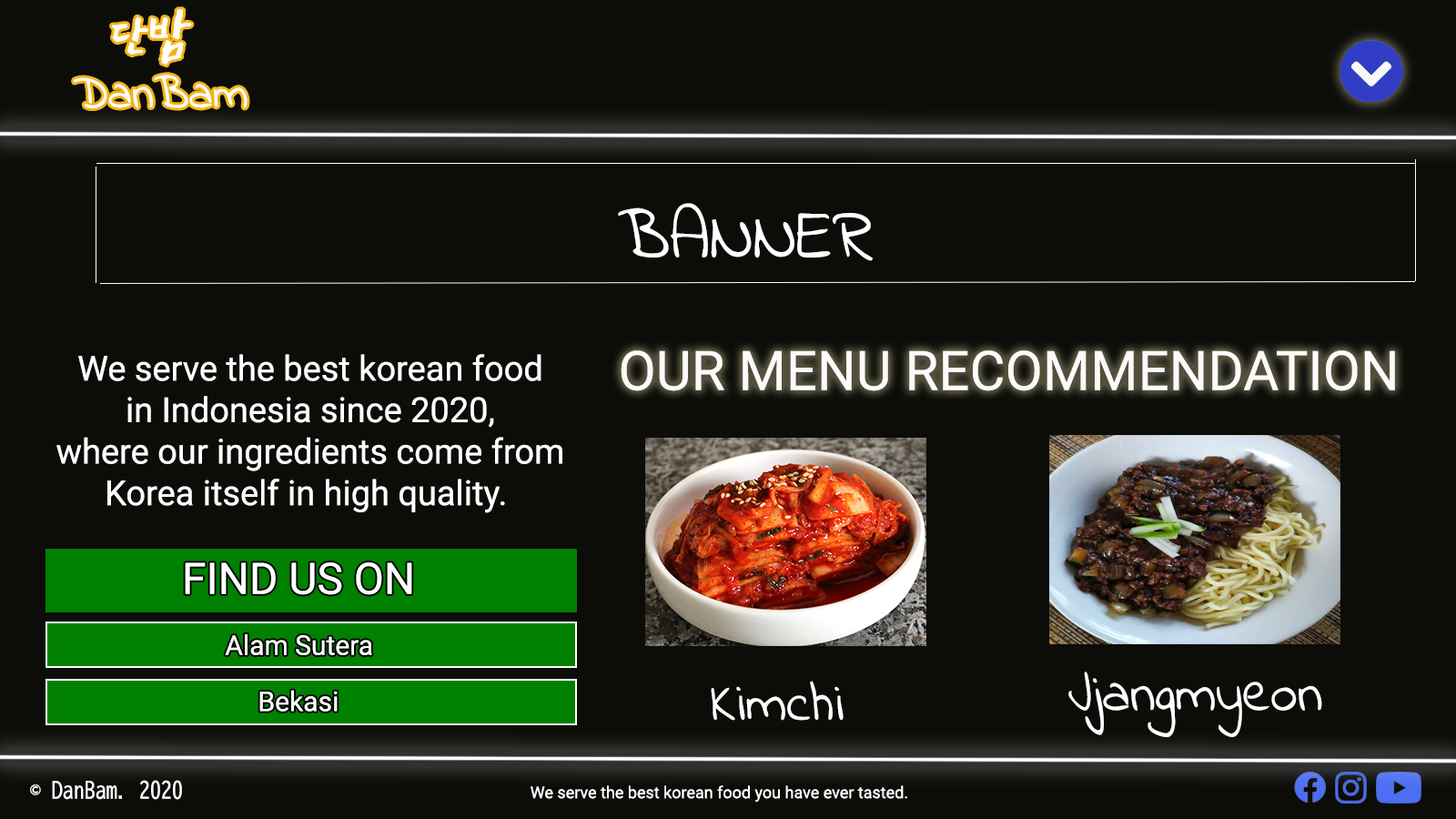
<style>
.page{position:relative;width:1456px;height:819px;background:#0c0c09}
.page>*{position:absolute;margin:0}
.t1{font:65.5px "EastSeaDokdo-Regular";color:#fffcf9}
.t2{font:47.3px "IndieFlower";color:#ffffff}
.t3{font:71px "IndieFlower";color:#ffffff}
.t4{font:34.6px "Roboto-Regular";color:#ffffff}
.t5{font:54.6px "Roboto-Regular";color:#fff9f9}
.t6{font:43.6px "Roboto-Regular";color:#ffffff}
.t7{font:27.3px "Roboto-Regular";color:#ffffff}
.t8{font:54.6px "IndieFlower";color:#ffffff}
.t9{font:21.8px "BIZ-UDGothic";color:#ffffff}
.t10{font:16.4px "Roboto-Regular";color:#ffffff}
</style>
<div class="page">
<p class="t1" style="left:112px;top:9px;width:80px;height:57px">단밤</p>
<p class="t2" style="left:74px;top:75px;width:174px;height:33px">DanBam</p>
<p class="t3" style="left:618px;top:203px;width:255px;height:58px">BANNER</p>
<p class="t4" style="left:56px;top:354px;width:506px;height:159px;text-align:center">We serve the best korean food<br>in Indonesia since 2020,<br>where our ingredients come from<br>Korea itself in high quality.</p>
<p class="t5" style="left:621px;top:350px;width:774px;height:41px">OUR MENU RECOMMENDATION</p>
<p class="t6" style="left:185px;top:562px;width:227px;height:33px">FIND US ON</p>
<p class="t7" style="left:225px;top:634px;width:147px;height:21px">Alam Sutera</p>
<p class="t8" style="left:1068px;top:672px;width:254px;height:65px">Jjangmyeon</p>
<p class="t7" style="left:259px;top:690px;width:79px;height:22px">Bekasi</p>
<p class="t8" style="left:711px;top:681px;width:133px;height:40px">Kimchi</p>
<p class="t9" style="left:30px;top:780px;width:152px;height:20px">© DanBam. 2020</p>
<p class="t10" style="left:531px;top:785px;width:376px;height:17px">We serve the best korean food you have ever tasted.</p>
</div>
